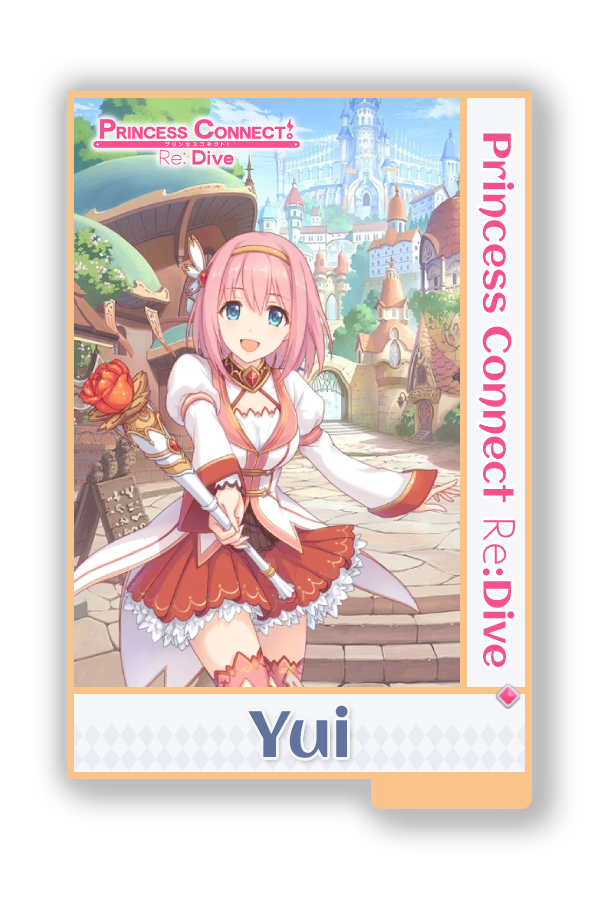
<style>
.page{position:relative;width:600px;height:900px;background:#ffffff}
.page>*{position:absolute;margin:0}
.t1{font:39px "Aclonica-Regular";color:#f55191}
.t2{font:39px "AaarghNormal";color:#f55191}
.t3{font:65px "Aclonica-Regular";color:#64739d}
</style>
<div class="page">
<p class="t1" style="left:478px;top:133px;width:38px;height:534px;rotate:90deg">Princess Connect <span class="t2">Re</span>:Dive</p>
<p class="t3" style="left:248px;top:705px;width:100px;height:53px">Yui</p>
</div>
